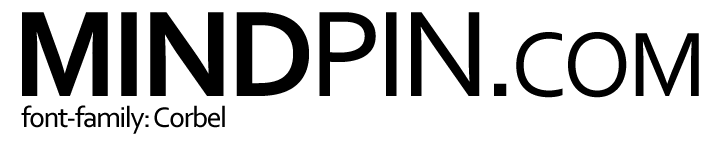
<style>
.page{position:relative;width:720px;height:141px;background:#ffffff}
.page>*{position:absolute;margin:0}
.t1{font:128px "Corbel-Bold";letter-spacing:-0.05em;color:#000000}
.t2{font:128px "Corbel";letter-spacing:-0.05em;color:#000000}
.t3{font:96px "Corbel";letter-spacing:-0.05em;color:#000000}
.t4{font:30px "Corbel";letter-spacing:-0.05em;color:#000000}
</style>
<div class="page">
<p class="t1" style="left:22px;top:12px;width:677px;height:86px">MIND<span class="t2">PIN.</span><span class="t3">COM</span></p>
<p class="t4" style="left:21px;top:105px;width:204px;height:29px">font-family: Corbel</p>
</div>
